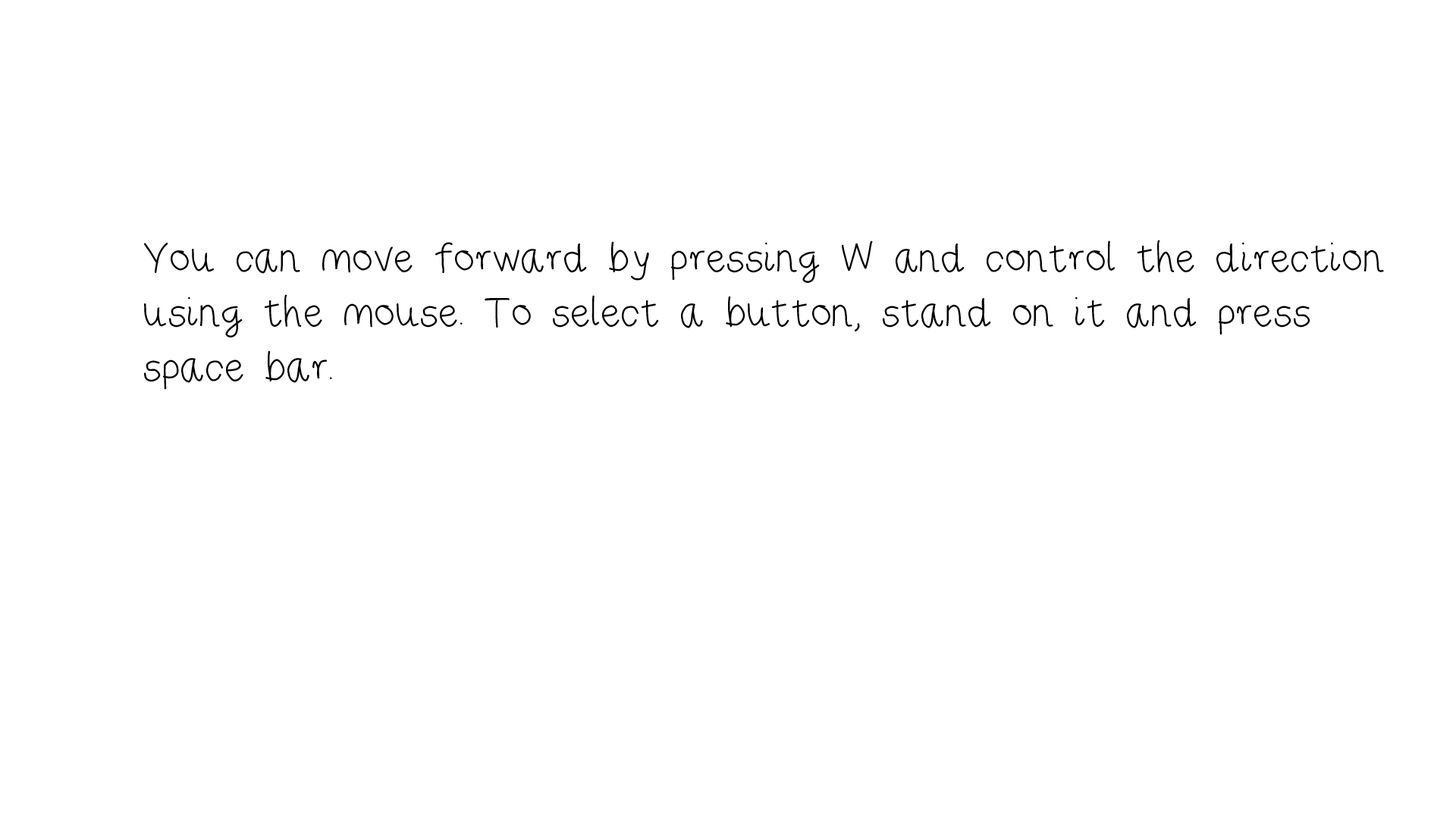
<style>
.page{position:relative;width:1456px;height:819px;background:#ffffff}
.page>*{position:absolute;margin:0}
.t1{font:45.5px "RiseStarHand";color:#000000}
</style>
<div class="page">
<p class="t1" style="left:144px;top:240px;width:1240px;height:150px">You can move forward by pressing W and control the direction<br>using the mouse. To select a button, stand on it and press <br>space bar.</p>
</div>
